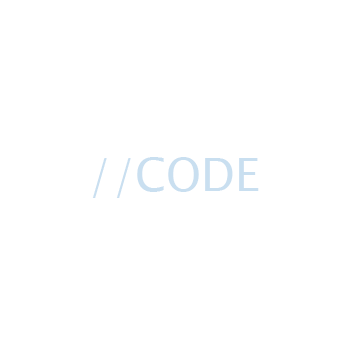
<style>
.page{position:relative;width:350px;height:355px;background:#ffffff}
.page>*{position:absolute;margin:0}
.t1{font:45px "LucidaSansUnicode";color:#c9dff0}
</style>
<div class="page">
<p class="t1" style="left:92px;top:157px;width:167px;height:41px">//CODE</p>
</div>
